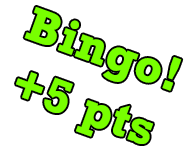
<style>
.page{position:relative;width:192px;height:154px;background:#ffffff}
.page>*{position:absolute;margin:0}
.t1{font:48px/60px "Rockwell-Bold";color:#78ff00;font-weight:bold}
</style>
<div class="page">
<p class="t1" style="left:16px;top:7px;width:166px;height:137px;text-align:justify;rotate:20deg">Bingo!<br>+5 pts</p>
</div>
